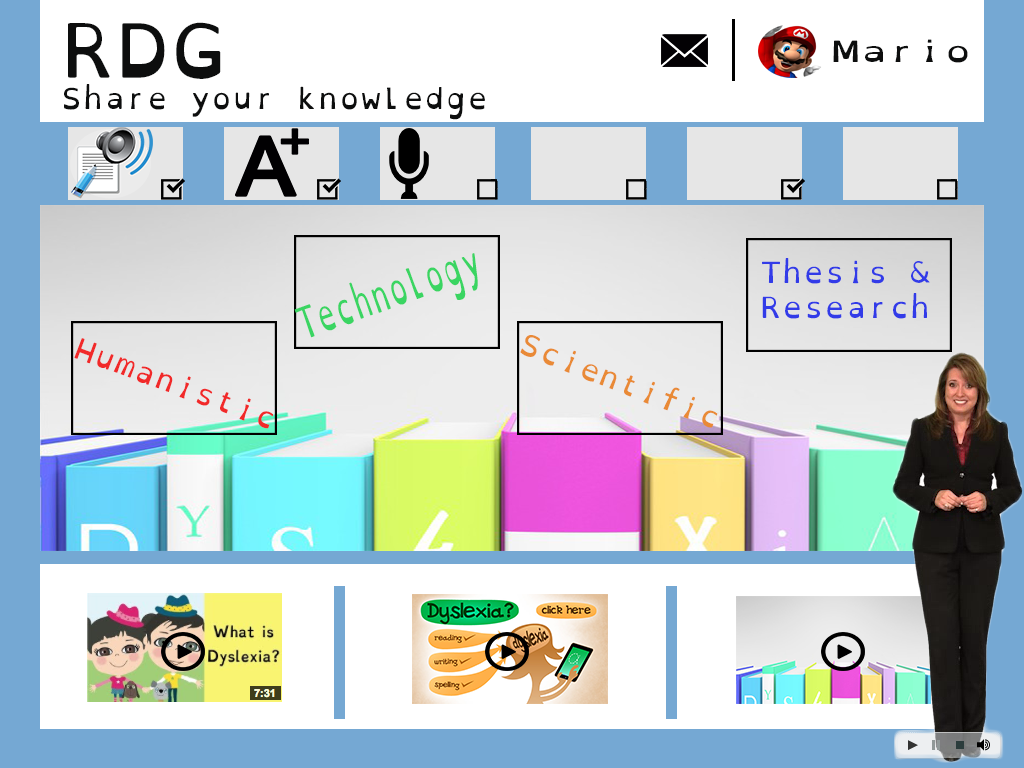
<style>
.page{position:relative;width:1024px;height:768px;background:#ffffff}
.page>*{position:absolute;margin:0}
.t1{font:75px "OpenDyslexicMono-Regular";color:#0d0e0e}
.t2{font:29.4px "OpenDyslexicMono-Regular";color:#0d0e0e;scale:1.3 1}
.t3{font:29.2px "OpenDyslexicMono-Regular";color:#0d0e0e}
.t4{font:43.7px "OpenDyslexicMono-Regular";color:#3ad562;scale:0.6 1}
.t5{font:29.2px "OpenDyslexicMono-Regular";color:#323be8}
.t6{font:29.2px "OpenDyslexicMono-Regular";color:#f12929}
.t7{font:29.2px "OpenDyslexicMono-Regular";color:#e98a36}
</style>
<div class="page">
<p class="t1" style="left:68px;top:22px;width:153px;height:57px">RDG</p>
<p class="t2" style="left:833px;top:39px;width:135px;height:24px">Mario</p>
<p class="t3" style="left:64px;top:84px;width:421px;height:36px">Share your knowledge</p>
<p class="t4" style="left:294px;top:253px;width:184px;height:85px;rotate:-20deg">Technology</p>
<p class="t5" style="left:762px;top:258px;width:168px;height:61px">Thesis &amp;<br>Research</p>
<p class="t6" style="left:74px;top:338px;width:200px;height:91px;rotate:20deg">Humanistic</p>
<p class="t7" style="left:520px;top:335px;width:198px;height:93px;rotate:21deg">Scientific</p>
</div>
